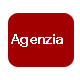
<style>
.page{position:relative;width:80px;height:80px;background:#a20000}
.page>*{position:absolute;margin:0}
.t1{font:14px "ArialRoundedMTBold";color:#ffffff}
</style>
<div class="page">
<p class="t1" style="left:11px;top:34px;width:52px;height:13px">Agenzia</p>
</div>
